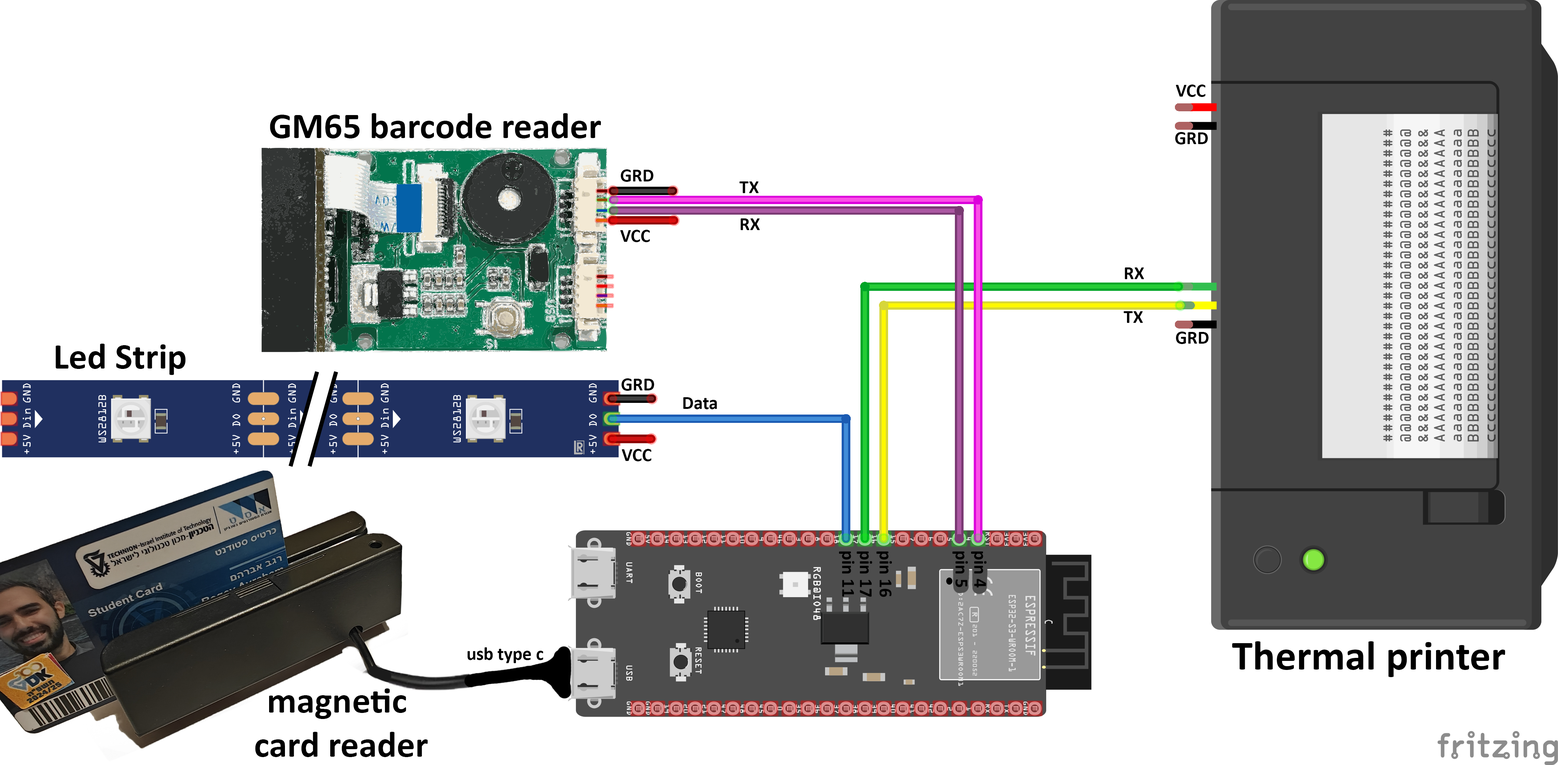
<style>
.page{position:relative;width:1558px;height:765px;background:#ffffff}
.page>*{position:absolute;margin:0}
.t1{font:18.3px "Calibri-Bold";color:#000000}
.t2{font:36.7px "Calibri-Bold";color:#000000}
.t3{font:41.9px "Calibri-Bold";color:#000000}
</style>
<div class="page">
<p class="t1" style="left:1176px;top:85px;width:29px;height:12px">VCC</p>
<p class="t2" style="left:270px;top:113px;width:331px;height:26px">GM65 barcode reader</p>
<p class="t1" style="left:1175px;top:132px;width:33px;height:13px">GRD</p>
<p class="t1" style="left:620px;top:169px;width:34px;height:13px">GRD</p>
<p class="t1" style="left:739px;top:182px;width:20px;height:11px">TX</p>
<p class="t1" style="left:740px;top:219px;width:20px;height:11px">RX</p>
<p class="t1" style="left:620px;top:230px;width:30px;height:12px">VCC</p>
<p class="t1" style="left:1125px;top:268px;width:19px;height:11px">RX</p>
<p class="t1" style="left:1124px;top:311px;width:19px;height:12px">TX</p>
<p class="t1" style="left:1176px;top:332px;width:33px;height:12px">GRD</p>
<p class="t2" style="left:55px;top:344px;width:131px;height:31px">Led Strip</p>
<p class="t1" style="left:621px;top:379px;width:33px;height:12px">GRD</p>
<p class="t1" style="left:683px;top:397px;width:34px;height:12px">Data</p>
<p class="t1" style="left:622px;top:449px;width:29px;height:13px">VCC</p>
<p class="t1" style="left:839px;top:552px;width:15px;height:45px;rotate:90deg">pin 11</p>
<p class="t1" style="left:857px;top:552px;width:15px;height:45px;rotate:90deg">pin 17</p>
<p class="t1" style="left:876px;top:552px;width:16px;height:45px;rotate:90deg">pin 16</p>
<p class="t1" style="left:952px;top:552px;width:16px;height:36px;rotate:90deg">pin 5</p>
<p class="t1" style="left:971px;top:552px;width:16px;height:36px;rotate:90deg">pin 4</p>
<p class="t3" style="left:1232px;top:642px;width:273px;height:35px">Thermal printer</p>
<p class="t1" style="left:467px;top:648px;width:76px;height:15px">usb type c</p>
<p class="t2" style="left:255px;top:689px;width:173px;height:68px;text-align:center">magnetic <br>card reader</p>
</div>
